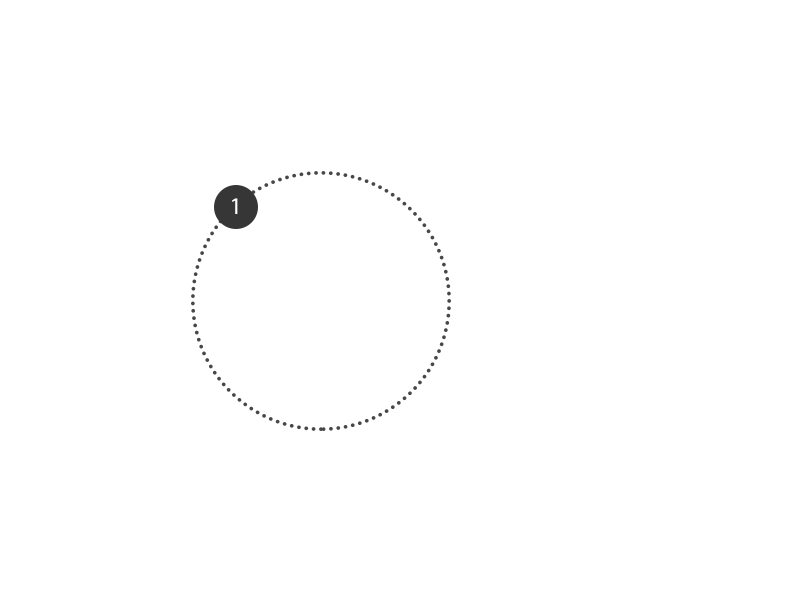
<style>
.page{position:relative;width:800px;height:600px;background:#ffffff}
.page>*{position:absolute;margin:0}
.t1{font:24px "MyriadPro-Regular";letter-spacing:-0.025em;color:#ffffff}
</style>
<div class="page">
<p class="t1" style="left:232px;top:198px;width:6px;height:16px">1</p>
</div>
